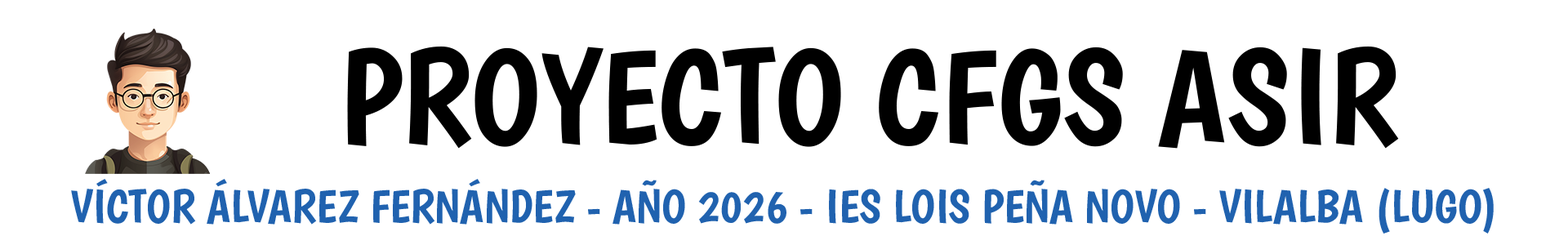
<style>
.page{position:relative;width:1568px;height:245px;background:#ffffff}
.page>*{position:absolute;margin:0}
.t1{font:133.1px "Boogaloo-Regular";color:#000000}
.t2{font:46.5px "Boogaloo-Regular";color:#2062af}
</style>
<div class="page">
<p class="t1" style="left:347px;top:46px;width:1052px;height:103px">PROYECTO CFGS ASIR</p>
<p class="t2" style="left:71px;top:179px;width:1423px;height:55px">VÍCTOR ÁLVAREZ FERNÁNDEZ - AÑO 2026 - IES LOIS PEÑA NOVO - VILALBA (LUGO)</p>
</div>
